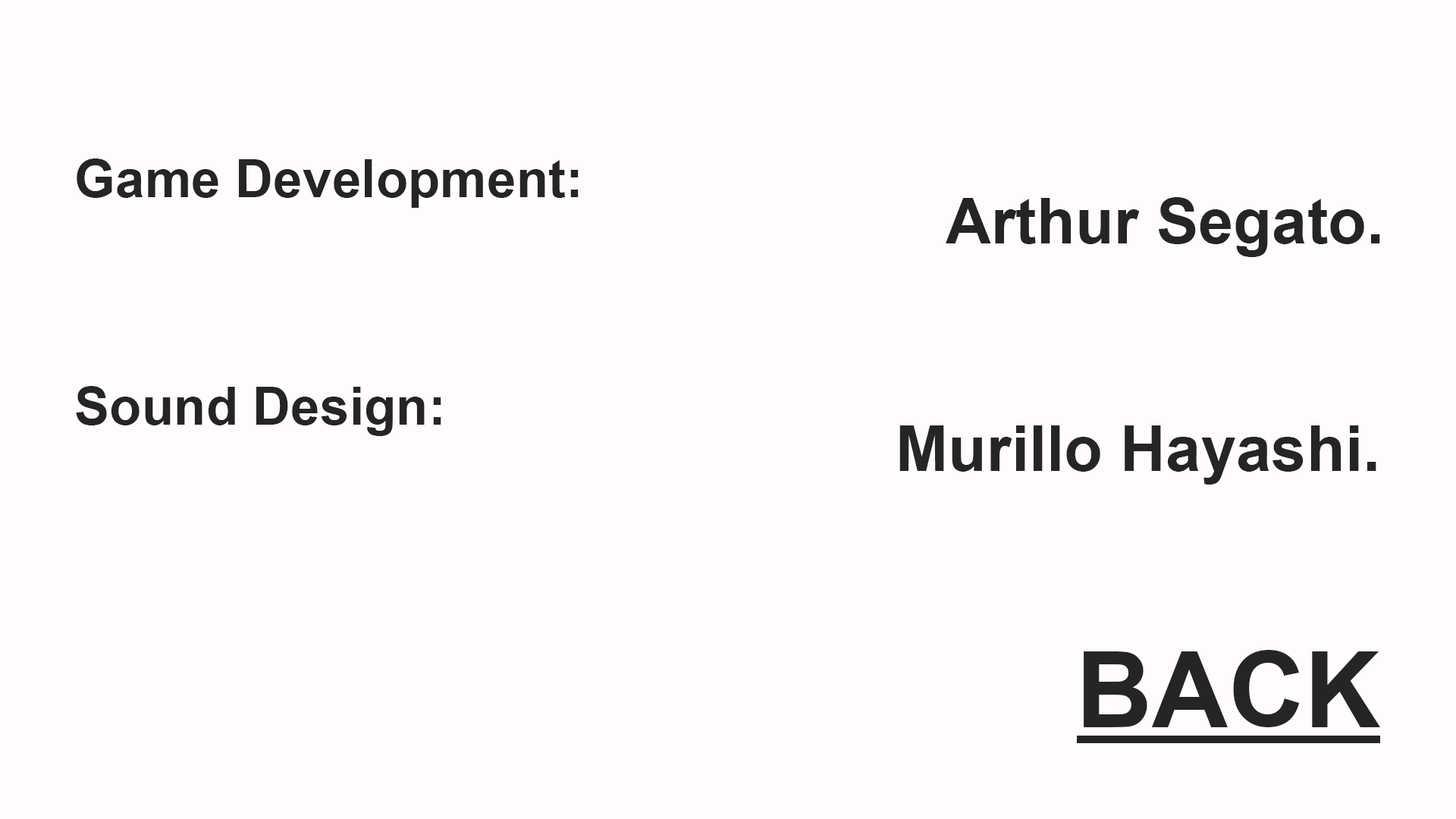
<style>
.page{position:relative;width:1456px;height:819px;background:#fffcfb}
.page>*{position:absolute;margin:0}
.t1{font:52.7px "Arial-BoldMT";color:#252525}
.t2{font:63.2px "Arial-BoldMT";color:#252525}
.t3{font:105.3px "Arial-BoldMT";color:#252525}
</style>
<div class="page">
<p class="t1" style="left:77px;top:158px;width:502px;height:50px">Game Development:</p>
<p class="t2" style="left:946px;top:197px;width:434px;height:60px">Arthur Segato.</p>
<p class="t1" style="left:76px;top:386px;width:365px;height:50px">Sound Design:</p>
<p class="t2" style="left:899px;top:425px;width:477px;height:60px">Murillo Hayashi.</p>
<p class="t3" style="left:1084px;top:650px;width:297px;height:77px">BACK</p>
</div>
